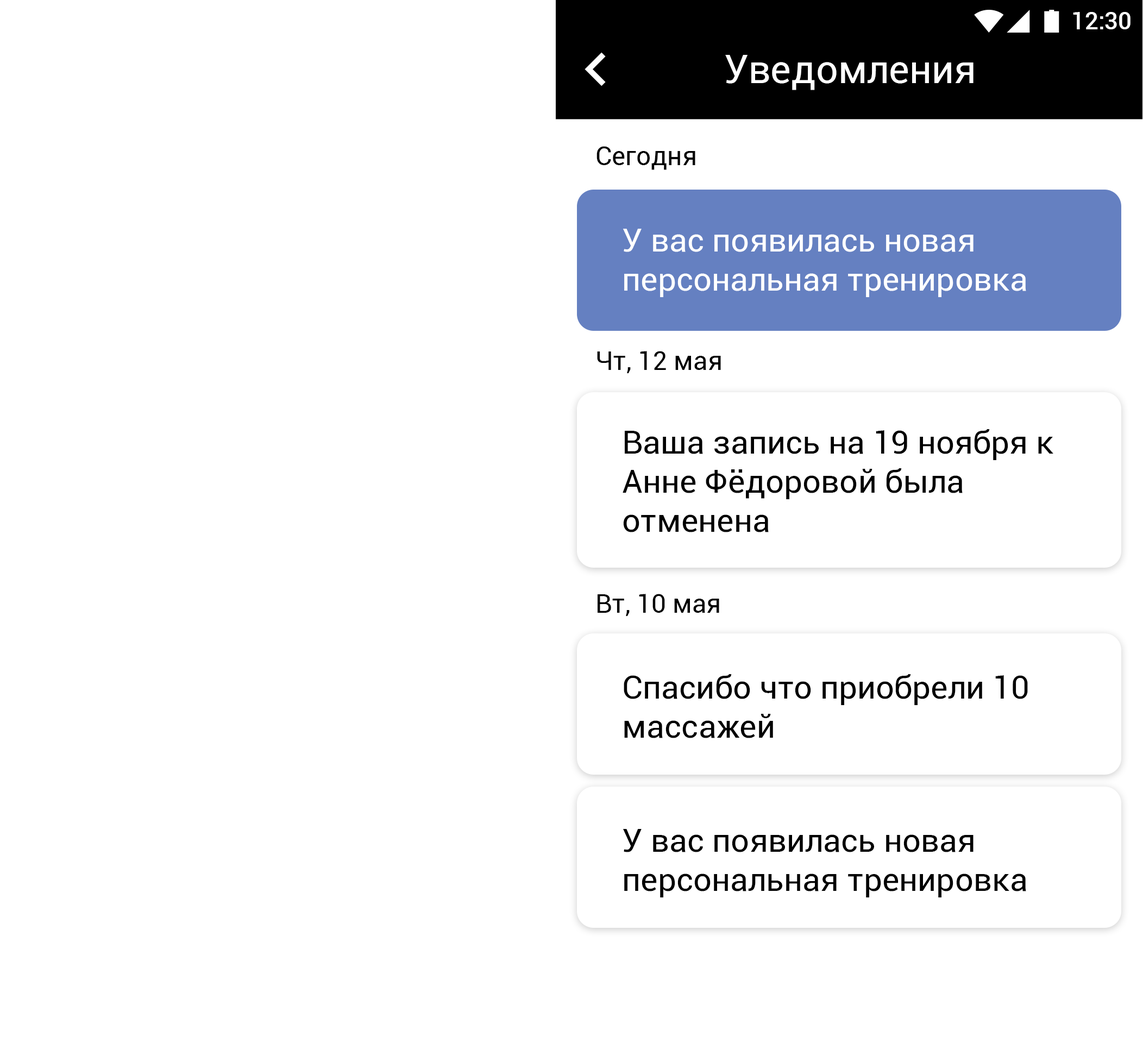
<style>
.page{position:relative;width:1143px;height:1043px;background:#ffffff}
.page>*{position:absolute;margin:0}
.t1{font:23.9px "Roboto-Medium";color:#ffffff}
.t2{font:39.1px "Roboto-Regular";color:#ffffff}
.t3{font:26.1px "Roboto-Regular";color:#000000}
.t4{font:32.6px "Roboto-Regular";color:#ffffff}
.t5{font:32.6px "Roboto-Regular";color:#000000}
</style>
<div class="page">
<p class="t1" style="left:1073px;top:12px;width:58px;height:17px">12:30</p>
<p class="t2" style="left:725px;top:55px;width:249px;height:35px">Уведомления</p>
<p class="t3" style="left:597px;top:146px;width:98px;height:24px">Сегодня</p>
<p class="t4" style="left:623px;top:229px;width:403px;height:68px">У вас появилась новая <br>персональная тренировка</p>
<p class="t3" style="left:597px;top:351px;width:124px;height:22px">Чт, 12 мая</p>
<p class="t5" style="left:623px;top:429px;width:430px;height:103px">Ваша запись на 19 ноября к <br>Анне Фёдоровой была <br>отменена</p>
<p class="t3" style="left:598px;top:594px;width:121px;height:22px">Вт, 10 мая</p>
<p class="t5" style="left:624px;top:674px;width:404px;height:64px">Спасибо что приобрели 10 <br>массажей</p>
<p class="t5" style="left:623px;top:829px;width:403px;height:69px">У вас появилась новая <br>персональная тренировка</p>
</div>
